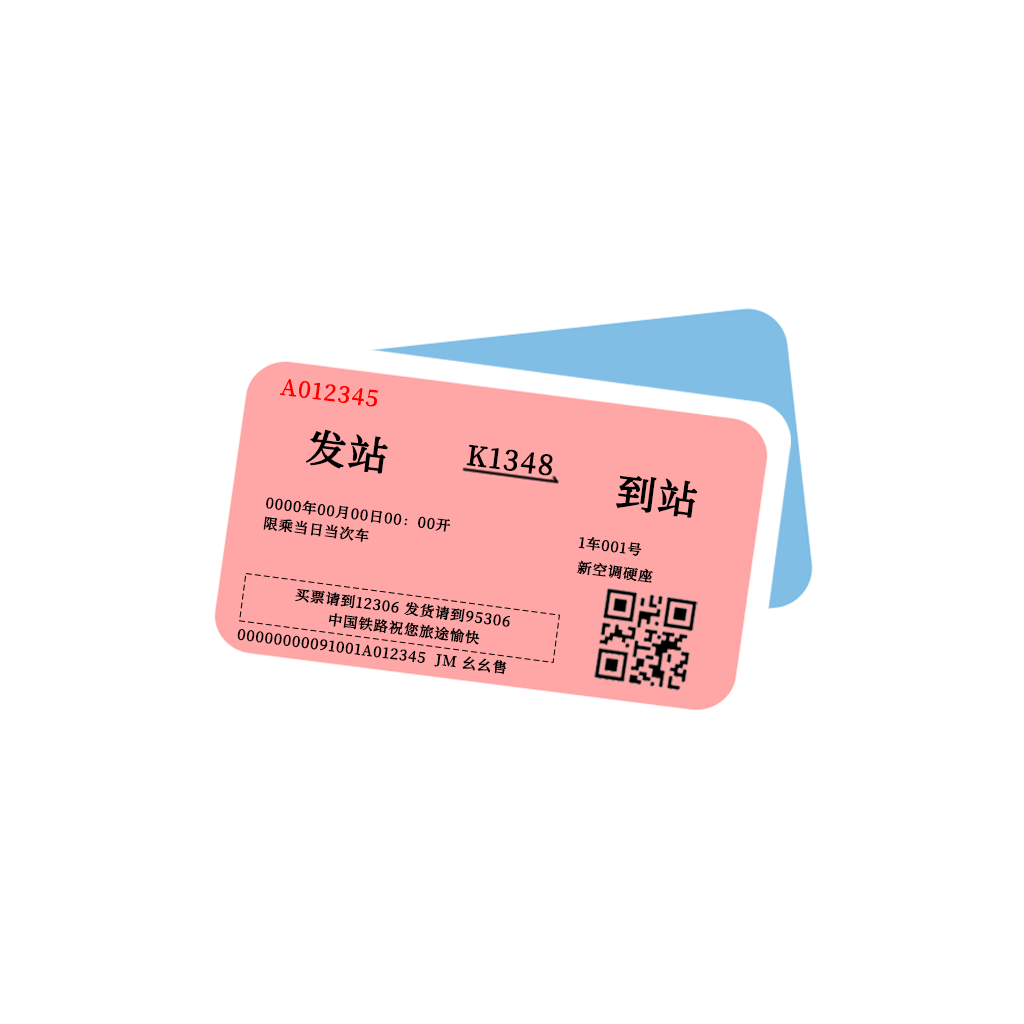
<style>
.page{position:relative;width:1024px;height:1024px;background:#ffffff}
.page>*{position:absolute;margin:0}
.t1{font:21.5px "ChillDuanHeiSongMedium";letter-spacing:0.06em;color:#ff0000;scale:1.03 1}
.t2{font:38.5px "ChillDuanHeiSongMedium";letter-spacing:0.06em;color:#000000}
.t3{font:26.7px "ChillDuanHeiSongMedium";letter-spacing:0.06em;color:#000000}
.t4{font:14px "ChillDuanHeiSongMedium";letter-spacing:0.06em;color:#000000;scale:1.03 1}
</style>
<div class="page">
<p class="t1" style="left:279px;top:379px;width:99px;height:28px;rotate:7deg">A012345</p>
<p class="t2" style="left:306px;top:429px;width:82px;height:45px;rotate:7deg">发站</p>
<p class="t3" style="left:466px;top:444px;width:87px;height:32px;rotate:7deg">K1348</p>
<p class="t2" style="left:615px;top:475px;width:83px;height:43px;rotate:7deg">到站</p>
<p class="t4" style="left:266px;top:497px;width:185px;height:35px;rotate:7deg">0000年00月00日00：00开</p>
<p class="t4" style="left:263px;top:516px;width:106px;height:26px;rotate:7deg">限乘当日当次车</p>
<p class="t4" style="left:578px;top:537px;width:64px;height:19px;rotate:7deg">1车001号</p>
<p class="t4" style="left:577px;top:560px;width:76px;height:23px;rotate:7deg">新空调硬座</p>
<p class="t4" style="left:295px;top:589px;width:215px;height:38px;rotate:7deg">买票请到12306 发货请到95306</p>
<p class="t4" style="left:329px;top:613px;width:151px;height:32px;rotate:7deg">中国铁路祝您旅途愉快</p>
<p class="t4" style="left:237px;top:629px;width:270px;height:46px;rotate:7deg">00000000091001A012345  JM 幺幺售</p>
</div>
